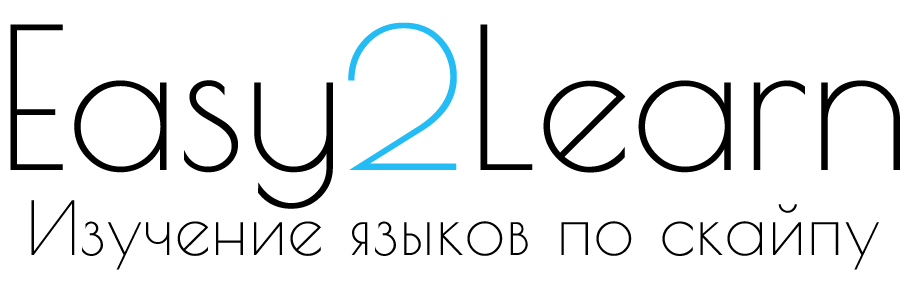
<style>
.page{position:relative;width:910px;height:289px;background:#ffffff}
.page>*{position:absolute;margin:0}
.t1{font:194px "PoiretOne-Regular";color:#000000}
.t2{font:194px "PoiretOne-Regular";color:#23bcf5}
.t3{font:73px "PoiretOne-Regular";color:#000000}
</style>
<div class="page">
<p class="t1" style="left:10px;top:22px;width:890px;height:187px">Easy<span class="t2">2</span>Learn</p>
<p class="t3" style="left:31px;top:200px;width:848px;height:70px">Изучение языков по скайпу</p>
</div>
